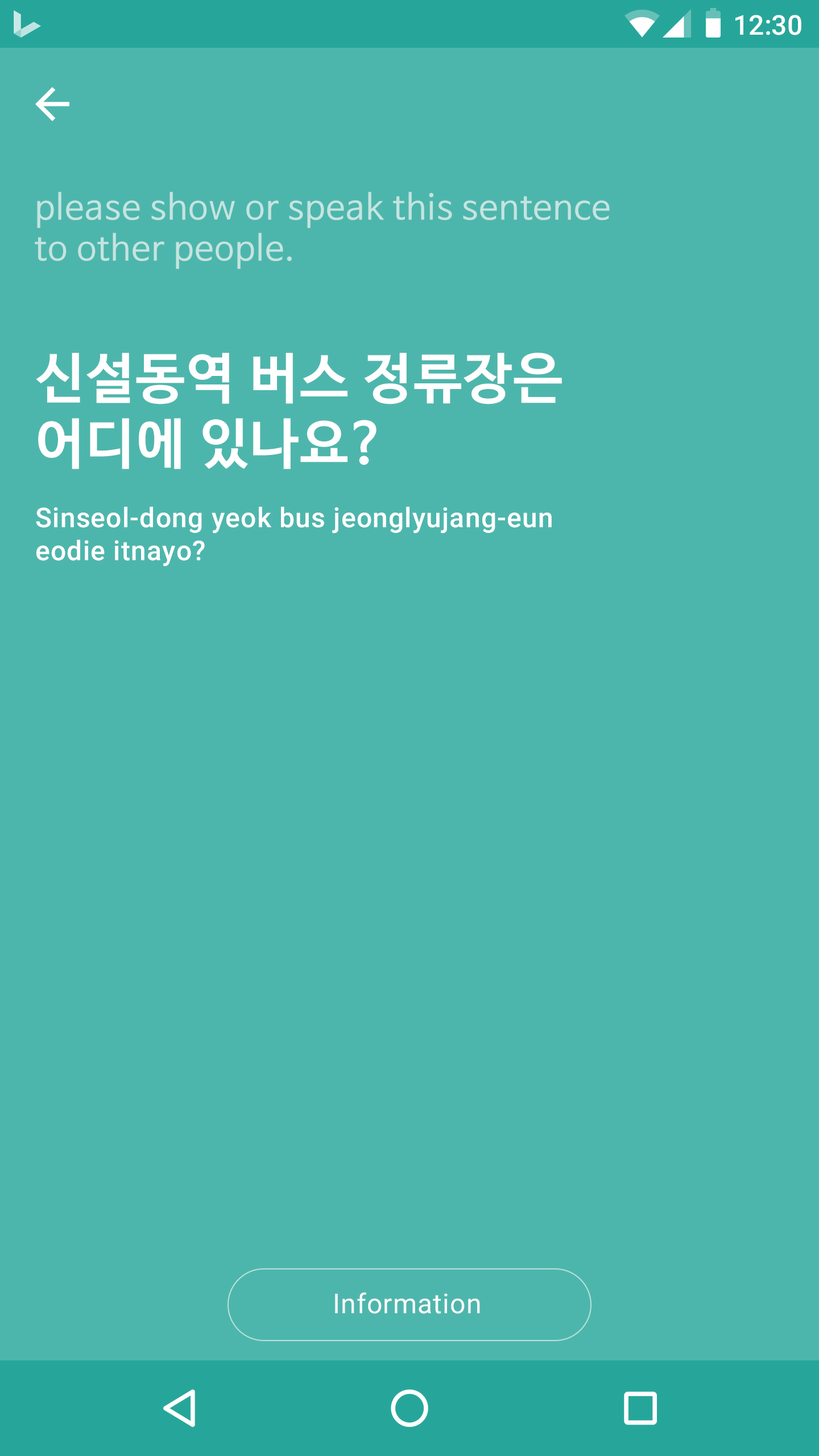
<style>
.page{position:relative;width:819px;height:1456px;background:#4db6ac}
.page>*{position:absolute;margin:0}
.t1{font:27.3px "Roboto-Medium";color:#ffffff}
.t2{font:34.1px/40.9px "NanumBarunGothic";letter-spacing:0.025em;color:#c5e4e0}
.t3{font:54.6px "NanumBarunGothicBold";letter-spacing:0.025em;color:#ffffff}
.t4{font:27.3px "Roboto-Medium";letter-spacing:0.025em;color:#ffffff}
.t5{font:27.3px "Roboto-Regular";letter-spacing:0.025em;color:#fafafa}
</style>
<div class="page">
<p class="t1" style="left:735px;top:15px;width:66px;height:20px">12:30</p>
<p class="t2" style="left:35px;top:192px;width:575px;height:77px">please show or speak this sentence <br>to other people.</p>
<p class="t3" style="left:36px;top:353px;width:526px;height:116px">신설동역 버스 정류장은 <br>어디에 있나요?</p>
<p class="t4" style="left:36px;top:507px;width:516px;height:59px">Sinseol-dong yeok bus jeonglyujang-eun <br>eodie itnayo?</p>
<p class="t5" style="left:335px;top:1292px;width:145px;height:22px">Information</p>
</div>
